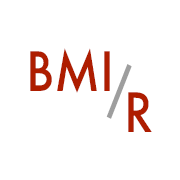
<style>
.page{position:relative;width:180px;height:180px;background:#ffffff}
.page>*{position:absolute;margin:0}
.t1{font:52.8px "Futura-Medium";color:#ae1d00;scale:0.91 1}
.t2{font:52.8px "Futura-Medium";color:#9e9e9e;scale:0.91 1}
</style>
<div class="page">
<p class="t1" style="left:30px;top:48px;width:80px;height:45px">BMI</p>
<p class="t2" style="left:106px;top:64px;width:26px;height:55px">/</p>
<p class="t1" style="left:128px;top:92px;width:24px;height:40px">R</p>
</div>
